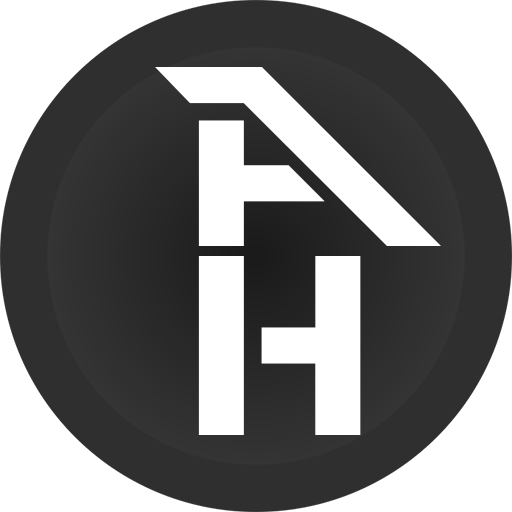
<style>
.page{position:relative;width:512px;height:512px;background:#ffffff}
.page>*{position:absolute;margin:0}
.t1{font:256px "PerfectDark(BRK)";color:#ffffff}
</style>
<div class="page">
<p class="t1" style="left:155px;top:67px;width:286px;height:179px">A</p>
<p class="t1" style="left:198px;top:256px;width:163px;height:179px">H</p>
</div>
